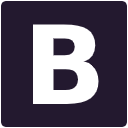
<style>
.page{position:relative;width:128px;height:128px;background:#23192f}
.page>*{position:absolute;margin:0}
.t1{font:109px "DejaVuSans-Bold";color:#ffffff}
</style>
<div class="page">
<p class="t1" style="left:33px;top:24px;width:66px;height:80px">B</p>
</div>
